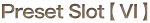
<style>
.page{position:relative;width:150px;height:23px;background:#ffffff}
.page>*{position:absolute;margin:0}
.t1{font:18px "GothicMB101Pro-DeBold";letter-spacing:-0.04em}
.t2{font:18px "GothicMB101Pro-DeBold";letter-spacing:-0.04em;color:#8b6e51}
</style>
<div class="page">
<p class="t1" style="left:2px;top:2px;width:146px;height:19px">Preset Slot【     】</p>
<p class="t2" style="left:119px;top:4px;width:18px;height:15px;opacity:0.9">VI</p>
</div>
